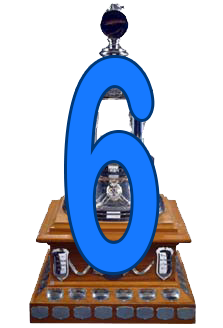
<style>
.page{position:relative;width:223px;height:328px;background:#ffffff}
.page>*{position:absolute;margin:0}
.t1{font:291.5px "ArialRoundedMTBold";letter-spacing:0.02em;color:#1679ff;scale:0.6 1}
</style>
<div class="page">
<p class="t1" style="left:67px;top:58px;width:90px;height:214px">6</p>
</div>
